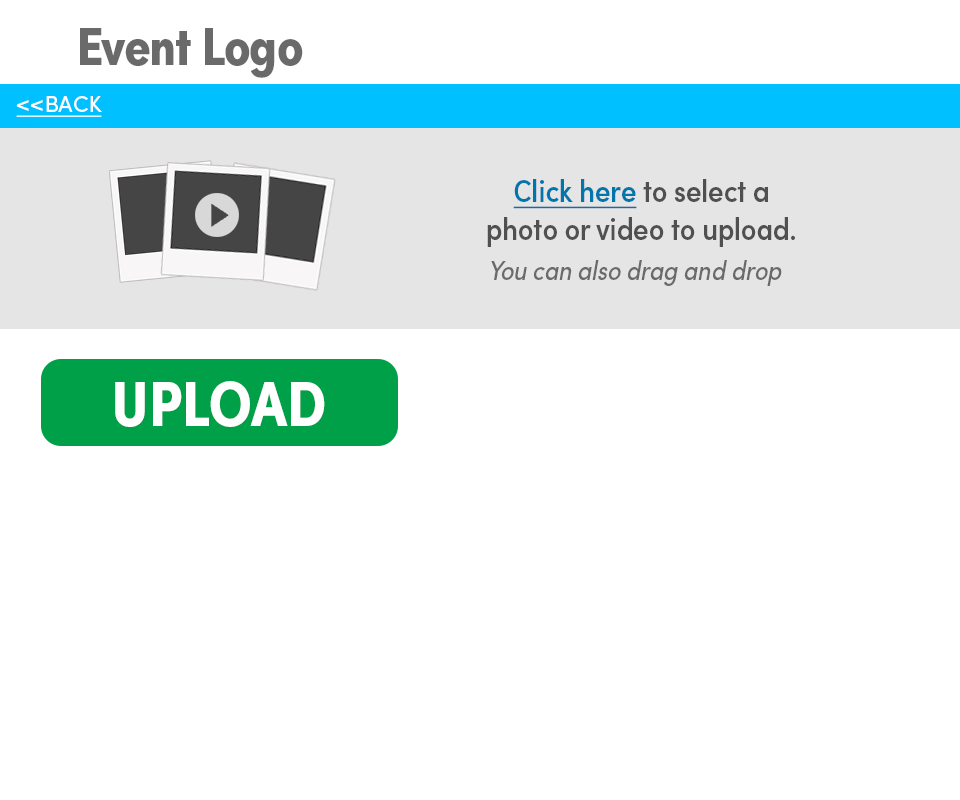
<style>
.page{position:relative;width:960px;height:800px;background:#ffffff}
.page>*{position:absolute;margin:0}
.t1{font:54.2px "SofiaProBoldCondensed";letter-spacing:-0.02em;color:#6a6a6a}
.t2{font:22.6px "SofiaProRegular";color:#ffffff;text-decoration:underline}
.t3{font:31.6px "SofiaProMediumCondensed";color:#515050}
.t4{font:31.6px "SofiaProMediumCondensed";color:#0176ac;text-decoration:underline}
.t5{font:27.1px "SofiaProRegularCondensed-Italic";color:#6a6a6a}
.t6{font:63.2px "SofiaProBoldCondensed";color:#ffffff}
</style>
<div class="page">
<p class="t1" style="left:80px;top:28px;width:223px;height:50px">Event Logo</p>
<p class="t2" style="left:16px;top:96px;width:86px;height:21px">&lt;&lt;BACK</p>
<p class="t3" style="left:487px;top:179px;width:308px;height:68px;text-align:center"><span class="t4">Click here</span> to select a photo or video to upload.</p>
<p class="t5" style="left:491px;top:260px;width:291px;height:26px">You can also drag and drop</p>
<p class="t6" style="left:115px;top:381px;width:210px;height:46px">UPLOAD</p>
</div>
